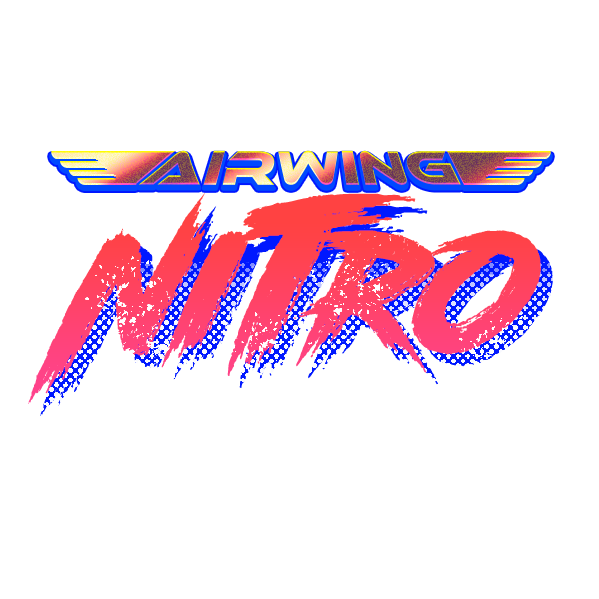
<style>
.page{position:relative;width:599px;height:599px;background:#ffffff}
.page>*{position:absolute;margin:0}
.t1{font:50.8px "EthnocentricRg-Bold";text-transform:uppercase}
.t2{font:176.2px "RoadRage";letter-spacing:0.3em}
.t3{font:228.6px "RoadRage";letter-spacing:0.3em}
</style>
<div class="page">
<p class="t1" style="left:138px;top:150px;width:323px;height:35px">AirWing</p>
<p class="t2" style="left:28px;top:178px;width:513px;height:226px">Ni<span class="t3">t</span>ro</p>
<p class="t2" style="left:40px;top:190px;width:513px;height:226px">Ni<span class="t3">t</span>ro</p>
</div>
